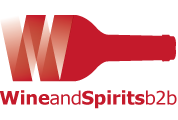
<style>
.page{position:relative;width:178px;height:120px;background:#ffffff}
.page>*{position:absolute;margin:0}
.t1{font:18.5px "Tahoma-Bold";color:#c41a2b;scale:1.06 1}
.t2{font:18.5px "Tahoma";color:#c41a2b;scale:1.06 1}
</style>
<div class="page">
<p class="t1" style="left:0px;top:90px;width:177px;height:19px">Wine<span class="t2">and</span>Spirits<span class="t2">b2b</span></p>
</div>
